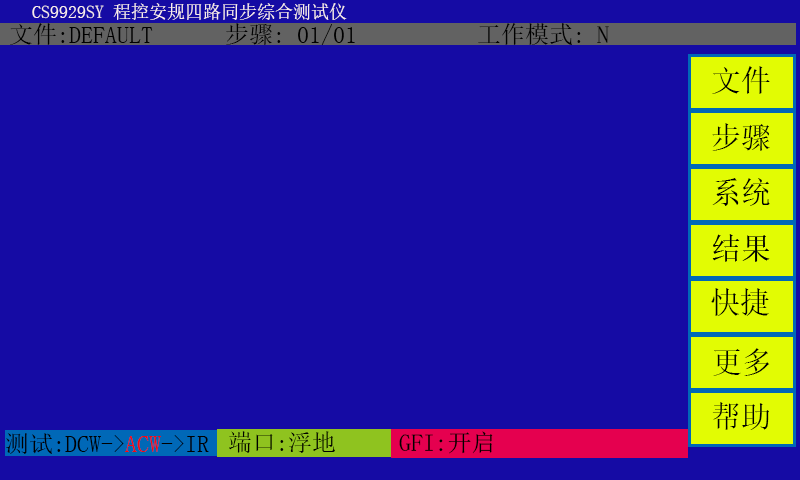
<style>
.page{position:relative;width:800px;height:480px;background:#150ba4}
.page>*{position:absolute;margin:0}
.t1{font:18px "SimSun";color:#f9ecec}
.t2{font:24px "SimSun";color:#000000}
.t3{font:23.7px "SimSun";color:#000000}
</style>
<div class="page">
<p class="t1" style="left:32px;top:3px;width:315px;height:17px">CS9929SY 程控安规四路同步综合测试仪</p>
<p class="t2" style="left:10px;top:23px;width:599px;height:22px">文件:DEFAULT  步骤: 01/01    工作模式: N</p>
<p class="t2" style="left:229px;top:431px;width:106px;height:22px">端口:浮地</p>
<p class="t3" style="left:399px;top:431px;width:94px;height:23px">GFI:开启</p>
</div>
